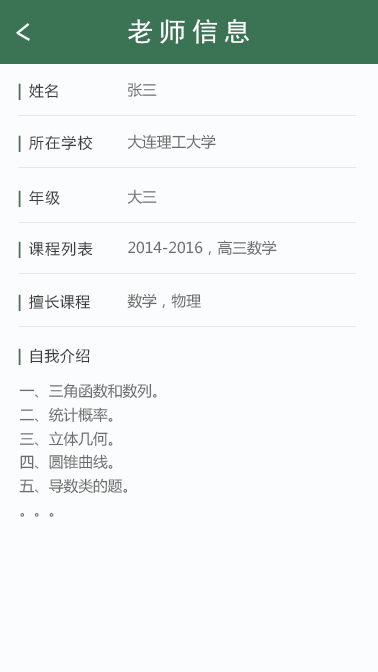
<style>
.page{position:relative;width:378px;height:672px;background:#fbfcfd}
.page>*{position:absolute;margin:0}
.t1{font:26.7px "SimHei";letter-spacing:0.2em;color:#ffffff}
.t2{font:14.7px "MicrosoftYaHei";letter-spacing:0.05em;color:#3f3f3f}
.t3{font:14.7px "MicrosoftYaHei";letter-spacing:0.1em;color:#3a7455;font-weight:bold}
.t4{font:14.7px "MicrosoftYaHei";color:#6e6e6e}
.t5{font:14.7px "MicrosoftYaHei";letter-spacing:0.1em;color:#3f3f3f}
.t6{font:14.7px/23.7px "MicrosoftYaHei";color:#6e6e6e}
</style>
<div class="page">
<p class="t1" style="left:128px;top:19px;width:121px;height:25px">老师信息</p>
<p class="t2" style="left:18px;top:83px;width:40px;height:18px"><span class="t3">| </span>姓名</p>
<p class="t4" style="left:128px;top:82px;width:29px;height:15px">张三</p>
<p class="t5" style="left:18px;top:135px;width:75px;height:18px"><span class="t3">|</span> 所在学校</p>
<p class="t4" style="left:127px;top:134px;width:89px;height:15px">大连理工大学</p>
<p class="t5" style="left:18px;top:190px;width:42px;height:18px"><span class="t3">|</span> 年级</p>
<p class="t4" style="left:127px;top:189px;width:30px;height:15px">大三</p>
<p class="t5" style="left:18px;top:241px;width:75px;height:18px"><span class="t3">|</span> 课程列表</p>
<p class="t4" style="left:128px;top:240px;width:149px;height:15px">2014-2016，高三数学</p>
<p class="t2" style="left:18px;top:294px;width:72px;height:18px"><span class="t3">| </span>擅长课程</p>
<p class="t4" style="left:127px;top:293px;width:74px;height:15px">数学，物理</p>
<p class="t2" style="left:18px;top:348px;width:72px;height:18px"><span class="t3">| </span>自我介绍</p>
<p class="t6" style="left:19px;top:383px;width:138px;height:134px">一、三角函数和数列。<br>二、统计概率。<br>三、立体几何。<br>四、圆锥曲线。<br>五、导数类的题。<br>。。。</p>
</div>
